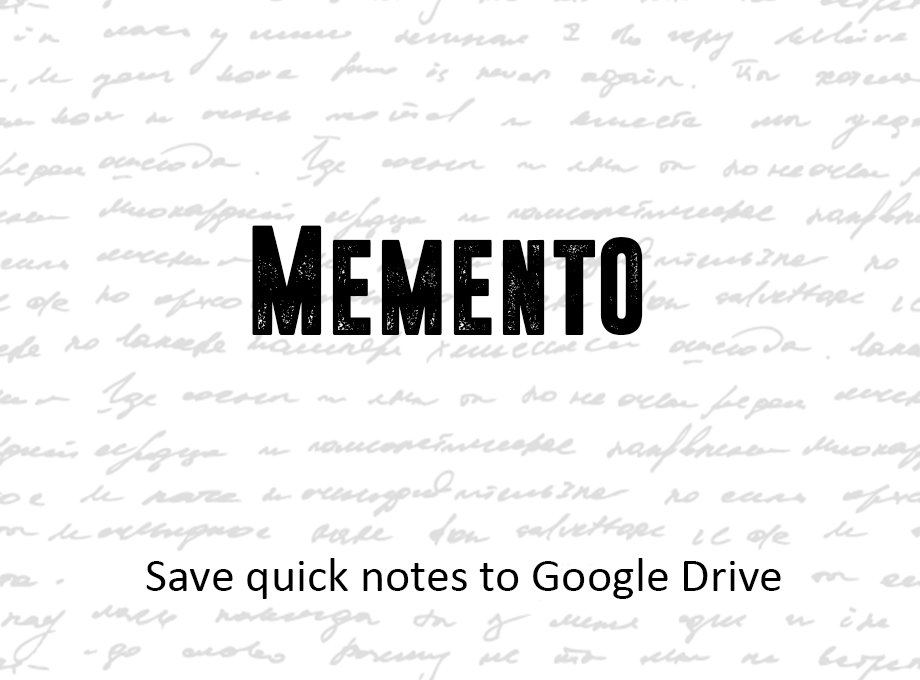
<style>
.page{position:relative;width:920px;height:680px;background:#ffffff}
.page>*{position:absolute;margin:0}
.t1{font:120px "Dreamwalker";color:#000000}
.t2{font:48px "Calibri";color:#000000}
</style>
<div class="page">
<p class="t1" style="left:252px;top:225px;width:391px;height:110px">Memento</p>
<p class="t2" style="left:146px;top:558px;width:635px;height:41px">Save quick notes to Google Drive</p>
</div>
